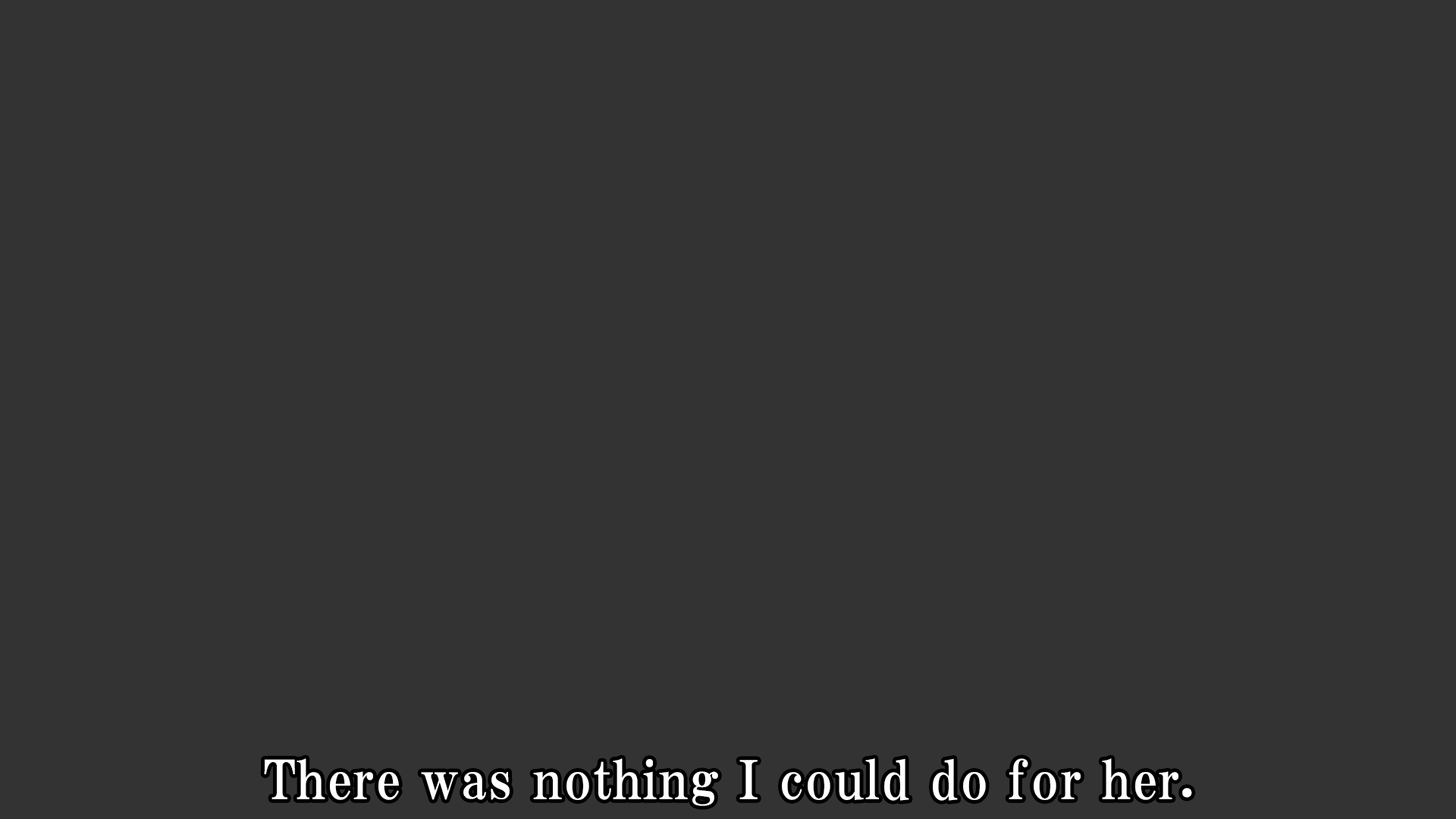
<style>
.page{position:relative;width:1456px;height:819px;background:#333333}
.page>*{position:absolute;margin:0}
.t1{font:53.1px "HGPMinchoE";letter-spacing:0.025em;color:#ffffff}
</style>
<div class="page">
<p class="t1" style="left:264px;top:758px;width:928px;height:48px">There was nothing I could do for her.</p>
</div>
